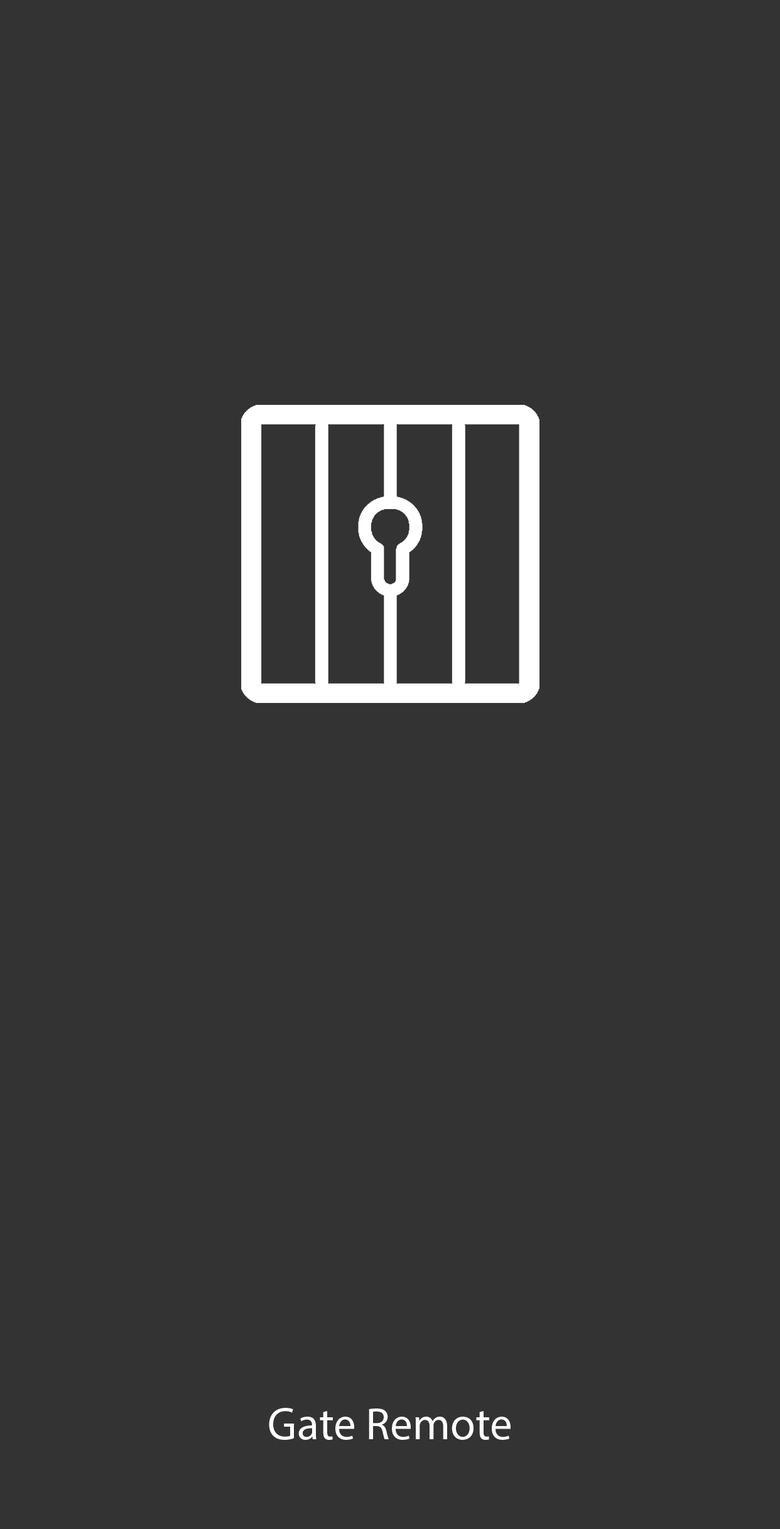
<style>
.page{position:relative;width:780px;height:1529px;background:#333333}
.page>*{position:absolute;margin:0}
.t1{font:45.2px "MyriadPro-Regular";color:#ffffff}
</style>
<div class="page">
<p class="t1" style="left:269px;top:1408px;width:241px;height:32px">Gate Remote</p>
</div>
